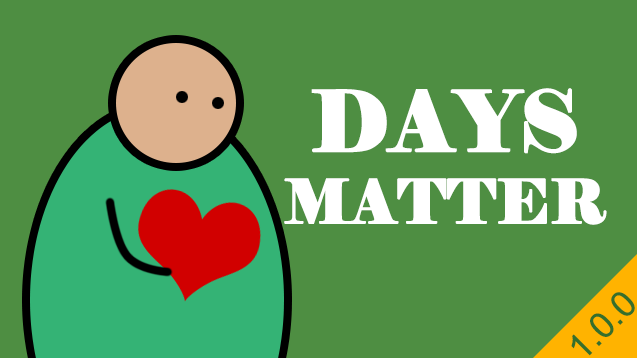
<style>
.page{position:relative;width:637px;height:358px;background:#4e8e42}
.page>*{position:absolute;margin:0}
.t1{font:60px "Elephant-Regular";color:#ffffff;text-transform:uppercase;font-weight:bold}
.t2{font:83px "Elephant-Regular";color:#ffffff;text-transform:uppercase;font-weight:bold}
</style>
<div class="page">
<p class="t1" style="left:284px;top:88px;width:323px;height:137px;text-align:center"><span class="t2">Days<br></span>Matter</p>
</div>
